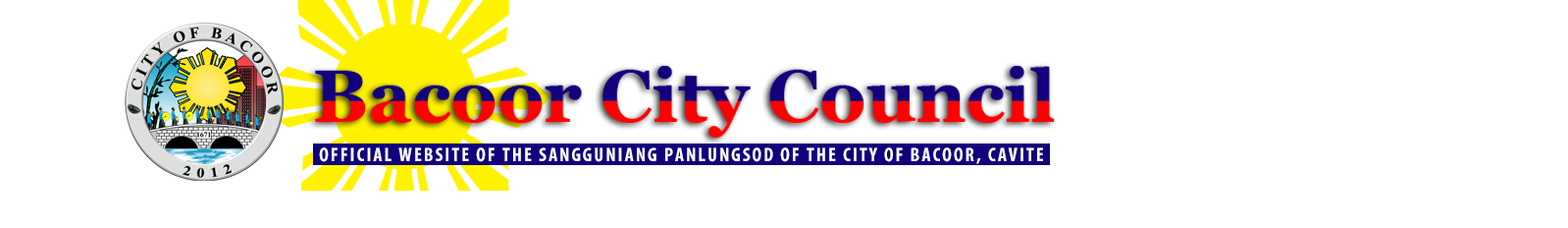
<style>
.page{position:relative;width:1568px;height:228px;background:#ffffff}
.page>*{position:absolute;margin:0}
.t1{font:19.6px "MyriadPro-BoldCond";letter-spacing:0.1em;color:#ffffff}
</style>
<div class="page">
<p class="t1" style="left:319px;top:147px;width:724px;height:17px">OFFICIAL WEBSITE OF THE SANGGUNIANG PANLUNGSOD OF THE CITY OF BACOOR, CAVITE</p>
</div>
